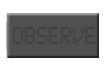
<style>
.page{position:relative;width:110px;height:72px;background:#ffffff}
.page>*{position:absolute;margin:0}
.t1{font:26px "DS-Digital";letter-spacing:-0.025em;color:#404040}
</style>
<div class="page">
<p class="t1" style="left:12px;top:27px;width:84px;height:18px">Observe</p>
</div>
